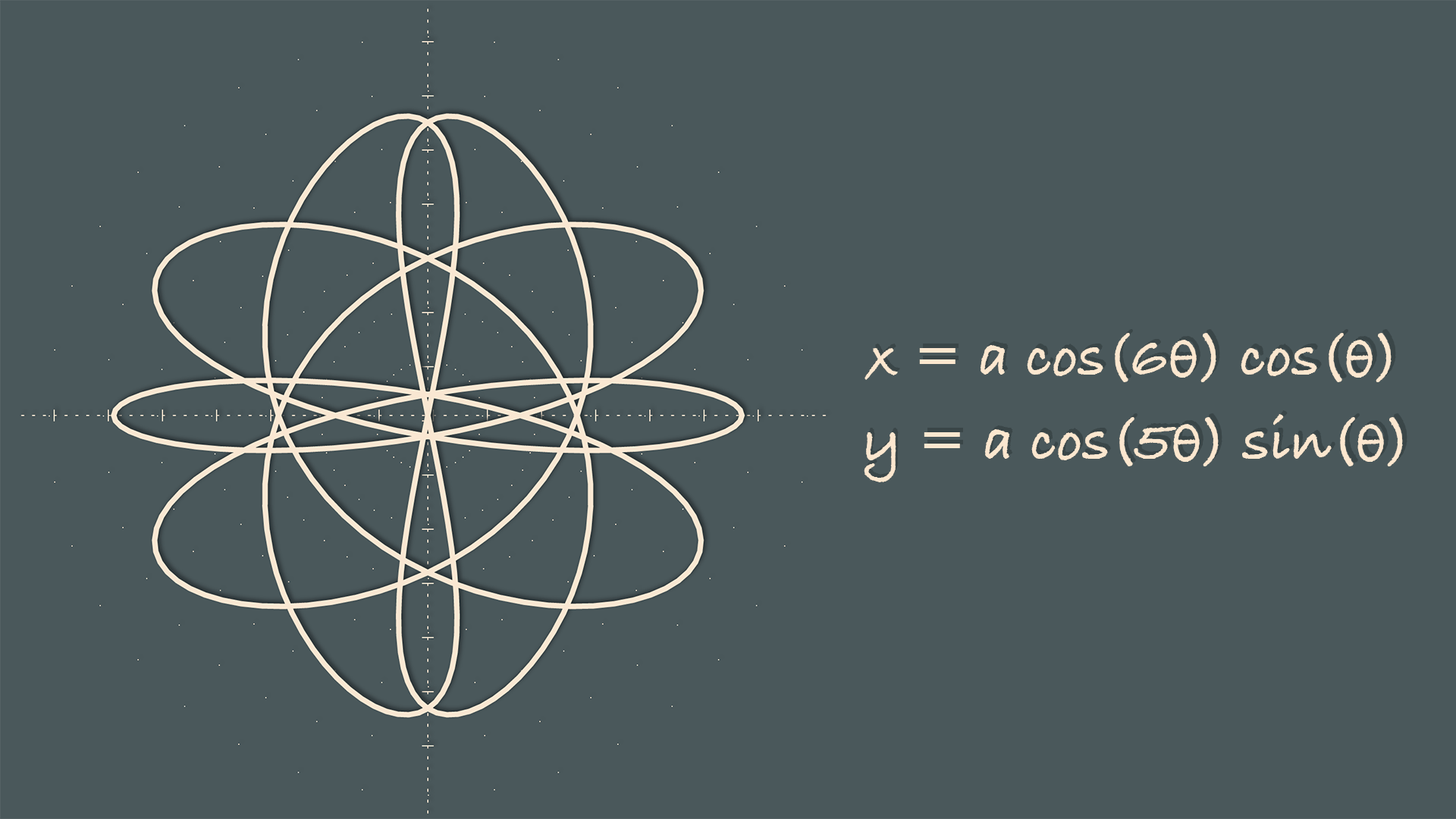
<style>
.page{position:relative;width:1456px;height:819px;background:#4a585b}
.page>*{position:absolute;margin:0}
.t1{font:60.7px "BradleyHandITCTT-Bold";color:#fce7cf}
</style>
<div class="page">
<p class="t1" style="left:864px;top:333px;width:528px;height:49px">x = a cos(6θ) cos(θ)</p>
<p class="t1" style="left:864px;top:414px;width:539px;height:68px">y = a cos(5θ) sin(θ)</p>
</div>
